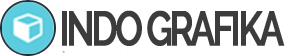
<style>
.page{position:relative;width:292px;height:56px;background:#ffffff}
.page>*{position:absolute;margin:0}
.t1{font:48px "Raleway-SemiBold";letter-spacing:-0.1em;color:#3c3c3c;font-weight:bold;scale:0.76 1}
</style>
<div class="page">
<p class="t1" style="left:62px;top:10px;width:223px;height:36px">INDO GRAFIKA</p>
</div>
